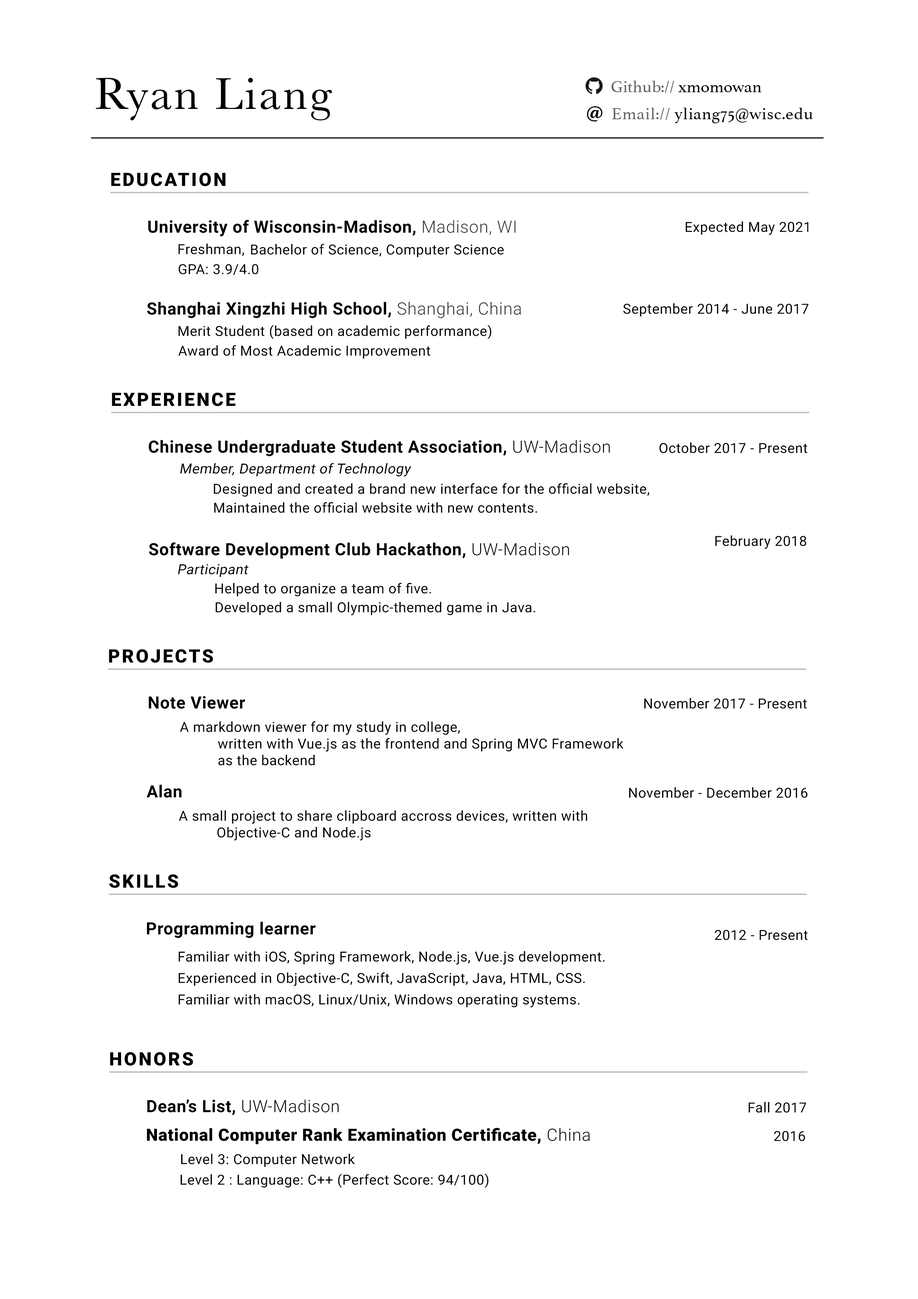
<style>
.page{position:relative;width:918px;height:1299px;background:#ffffff}
.page>*{position:absolute;margin:0}
.t1{font:46.3px "Baskerville";letter-spacing:0.05em;color:#000000}
.t2{font:17px "Athelas-Regular";color:#646464}
.t3{font:17px "Athelas-Regular";color:#000000}
.t4{font:17px "PTSerif-Bold";letter-spacing:0.025em;color:#000000}
.t5{font:17px "Athelas-Regular";letter-spacing:0.025em;color:#010000}
.t6{font:17px "Athelas-Regular";letter-spacing:0.025em;color:#646464}
.t7{font:18.5px "Roboto-Black";letter-spacing:0.1em;color:#000000}
.t8{font:17px "Roboto-Bold";letter-spacing:0.025em;color:#000000}
.t9{font:17px "Roboto-Light";letter-spacing:0.025em;color:#323232}
.t10{font:13.9px "Roboto-Regular";letter-spacing:0.025em;color:#000000}
.t11{font:17px "Roboto-Light";letter-spacing:0.025em;color:#000000}
.t12{font:13.9px "Roboto-Regular";letter-spacing:0.025em;color:#000000;font-style:italic}
.t13{font:17px "Roboto-Black";letter-spacing:0.025em;color:#000000}
</style>
<div class="page">
<p class="t1" style="left:96px;top:78px;width:236px;height:42px">Ryan Liang</p>
<p class="t2" style="left:612px;top:81px;width:150px;height:12px">Github://<span class="t3"> xmomowan</span></p>
<p class="t4" style="left:587px;top:106px;width:16px;height:15px">@</p>
<p class="t5" style="left:612px;top:108px;width:201px;height:15px"><span class="t6">Email:// </span>yliang75@wisc.edu</p>
<p class="t7" style="left:111px;top:173px;width:114px;height:13px">EDUCATION</p>
<p class="t8" style="left:148px;top:220px;width:368px;height:17px">University of Wisconsin-Madison, <span class="t9">Madison, WI</span></p>
<p class="t10" style="left:686px;top:221px;width:123px;height:14px">Expected May 2021</p>
<p class="t10" style="left:178px;top:244px;width:66px;height:12px">Freshman,</p>
<p class="t10" style="left:251px;top:244px;width:253px;height:13px">Bachelor of Science, Computer Science</p>
<p class="t10" style="left:178px;top:264px;width:80px;height:11px">GPA: 3.9/4.0</p>
<p class="t8" style="left:147px;top:302px;width:374px;height:16px">Shanghai Xingzhi High School, <span class="t9">Shanghai, China</span></p>
<p class="t10" style="left:623px;top:303px;width:186px;height:14px">September 2014 - June 2017</p>
<p class="t10" style="left:178px;top:325px;width:314px;height:14px">Merit Student (based on academic performance)</p>
<p class="t10" style="left:178px;top:345px;width:253px;height:13px">Award of Most Academic Improvement</p>
<p class="t7" style="left:112px;top:392px;width:123px;height:14px">EXPERIENCE</p>
<p class="t8" style="left:149px;top:440px;width:461px;height:16px">Chinese Undergraduate Student Association, <span class="t11">UW-Madison</span></p>
<p class="t10" style="left:659px;top:442px;width:148px;height:11px">October 2017 - Present</p>
<p class="t12" style="left:180px;top:463px;width:231px;height:13px">Member, Department of Technology</p>
<p class="t10" style="left:214px;top:483px;width:435px;height:14px">Designed and created a brand new interface for the official website,</p>
<p class="t10" style="left:214px;top:502px;width:323px;height:11px">Maintained the official website with new contents.</p>
<p class="t8" style="left:149px;top:542px;width:420px;height:17px">Software Development Club Hackathon, <span class="t11">UW-Madison</span></p>
<p class="t10" style="left:715px;top:535px;width:91px;height:14px">February 2018</p>
<p class="t12" style="left:178px;top:564px;width:70px;height:13px">Participant</p>
<p class="t10" style="left:215px;top:583px;width:216px;height:13px">Helped to organize a team of five.</p>
<p class="t10" style="left:215px;top:602px;width:320px;height:13px">Developed a small Olympic-themed game in Java.</p>
<p class="t7" style="left:109px;top:649px;width:104px;height:14px">PROJECTS</p>
<p class="t8" style="left:149px;top:696px;width:96px;height:13px">Note Viewer</p>
<p class="t10" style="left:644px;top:698px;width:163px;height:11px">November 2017 - Present</p>
<p class="t10" style="left:180px;top:721px;width:444px;height:44px">A markdown viewer for my study in college, <br>          written with Vue.js as the frontend and Spring MVC Framework <br>          as the backend</p>
<p class="t8" style="left:147px;top:784px;width:35px;height:13px">Alan</p>
<p class="t10" style="left:629px;top:787px;width:179px;height:11px">November - December 2016</p>
<p class="t10" style="left:179px;top:810px;width:409px;height:30px">A small project to share clipboard accross devices, written with <br>          Objective-C and Node.js</p>
<p class="t7" style="left:109px;top:874px;width:69px;height:14px">SKILLS</p>
<p class="t8" style="left:147px;top:921px;width:169px;height:17px">Programming learner</p>
<p class="t10" style="left:715px;top:930px;width:93px;height:10px">2012 - Present</p>
<p class="t10" style="left:178px;top:951px;width:427px;height:13px">Familiar with iOS, Spring Framework, Node.js, Vue.js development.</p>
<p class="t10" style="left:178px;top:972px;width:407px;height:14px">Experienced in Objective-C, Swift, JavaScript, Java, HTML, CSS.</p>
<p class="t10" style="left:178px;top:994px;width:402px;height:13px">Familiar with macOS, Linux/Unix, Windows operating systems.</p>
<p class="t7" style="left:110px;top:1052px;width:83px;height:13px">HONORS</p>
<p class="t8" style="left:147px;top:1099px;width:192px;height:16px">Dean’s List, <span class="t11">UW-Madison</span></p>
<p class="t10" style="left:749px;top:1102px;width:57px;height:11px">Fall 2017</p>
<p class="t13" style="left:147px;top:1128px;width:443px;height:16px">National Computer Rank Examination Certificate, <span class="t11">China</span></p>
<p class="t10" style="left:774px;top:1131px;width:31px;height:10px">2016</p>
<p class="t10" style="left:181px;top:1153px;width:174px;height:14px">Level 3: Computer Network</p>
<p class="t10" style="left:181px;top:1173px;width:308px;height:15px">Level 2 : Language: C++ (Perfect Score: 94/100)</p>
</div>
